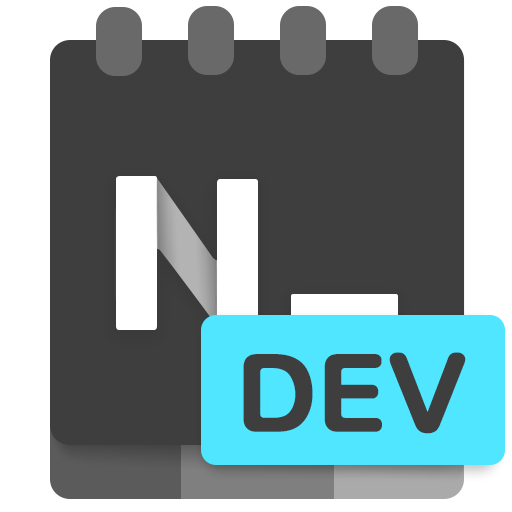
<style>
.page{position:relative;width:512px;height:512px;background:#3e3e3e}
.page>*{position:absolute;margin:0}
.t1{font:99.2px "NudMotoyaMaruW55-W5";color:#3e3e3e;font-weight:bold}
</style>
<div class="page">
<p class="t1" style="left:243px;top:352px;width:223px;height:82px">DEV</p>
</div>
